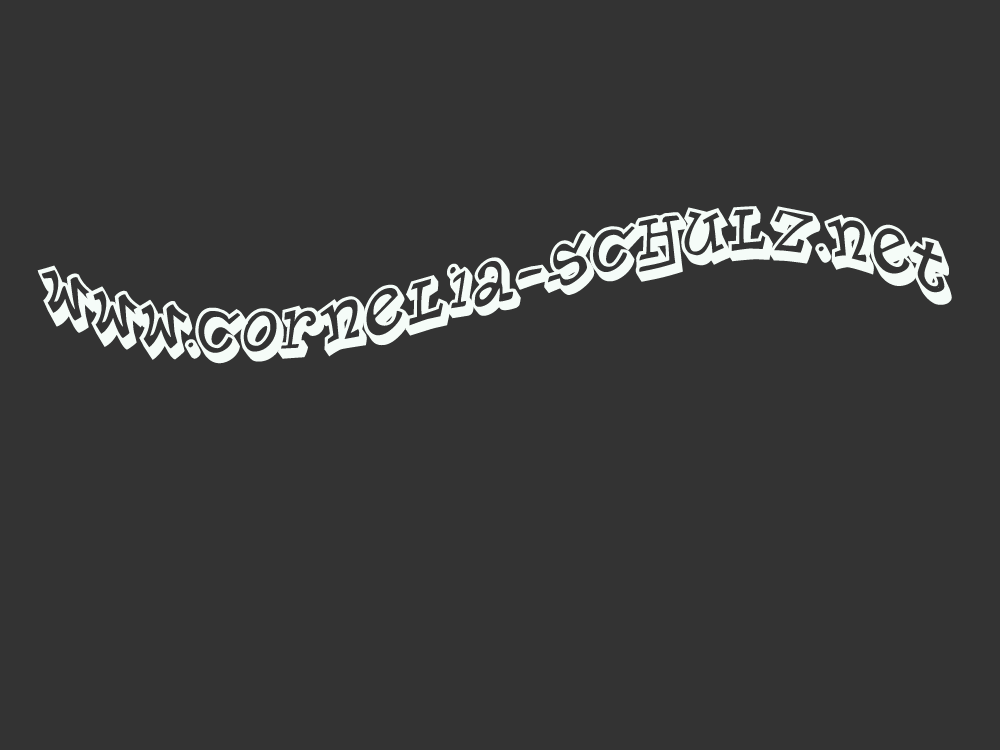
<style>
.page{position:relative;width:1000px;height:750px;background:#333333}
.page>*{position:absolute;margin:0}
.t1{font:59px "PlanetBenson2";color:#f5fcf8}
</style>
<div class="page">
<p class="t1" style="left:37px;top:206px;width:915px;height:158px">www.cornelia-schulz.net</p>
</div>
